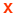
<style>
.page{position:relative;width:16px;height:16px;background:#ffffff}
.page>*{position:absolute;margin:0}
.t1{font:20px "DINMittelschrift";color:#ff3300}
</style>
<div class="page">
<p class="t1" style="left:3px;top:3px;width:10px;height:10px">x</p>
</div>
